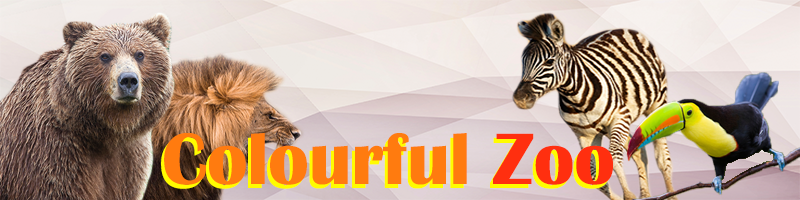
<style>
.page{position:relative;width:800px;height:200px}
.page>*{position:absolute;margin:0}
.t1{font:75px "BritannicBold"}
.t2{font:75px "BritannicBold";color:#ff7b0f}
.t3{font:75px "BritannicBold";color:#ff2f0f}
</style>
<div class="page">
<p class="t1" style="left:161px;top:137px;width:449px;height:52px">Colourful Zoo</p>
<p class="t2" style="left:164px;top:133px;width:449px;height:52px">Colourful <span class="t3">Zoo</span></p>
</div>
